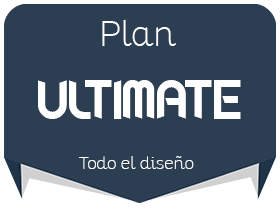
<style>
.page{position:relative;width:280px;height:210px;background:#2c3e52}
.page>*{position:absolute;margin:0}
.t1{font:34.7px "Altair-Thin";color:#ffffff}
.t2{font:48.6px "FluidLighter";color:#ffffff}
.t3{font:17.4px "Altair-Thin";color:#ffffff}
</style>
<div class="page">
<p class="t1" style="left:102px;top:19px;width:74px;height:27px">Plan</p>
<p class="t2" style="left:38px;top:80px;width:203px;height:39px">ULTIMATE</p>
<p class="t3" style="left:79px;top:156px;width:115px;height:13px">Todo el diseño</p>
</div>
